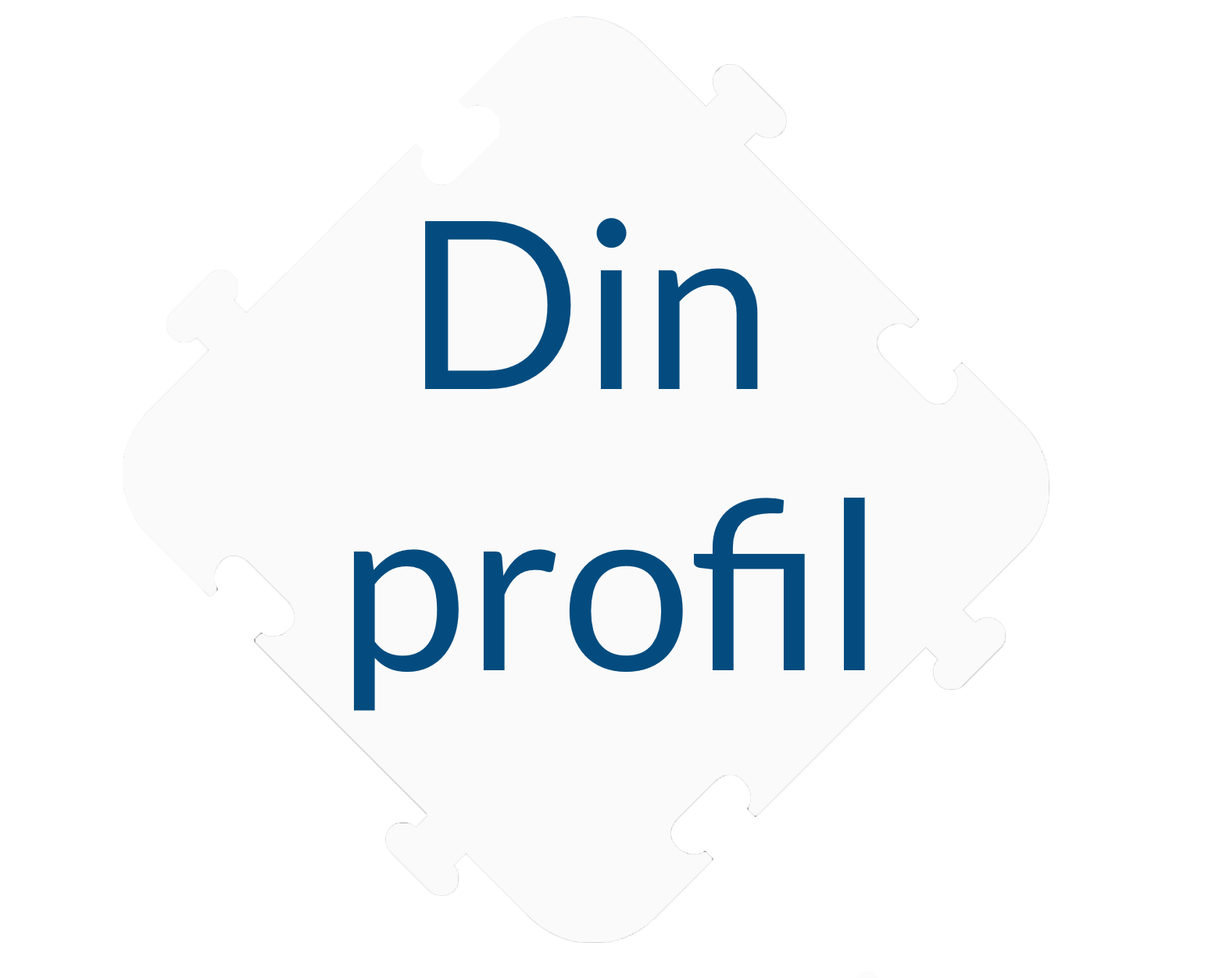
<style>
.page{position:relative;width:1219px;height:978px;background:#ffffff}
.page>*{position:absolute;margin:0}
.t1{font:234.4px "Lato-Regular";color:#044c7f}
</style>
<div class="page">
<p class="t1" style="left:353px;top:218px;width:512px;height:493px;text-align:center">Din <br>profil</p>
</div>
